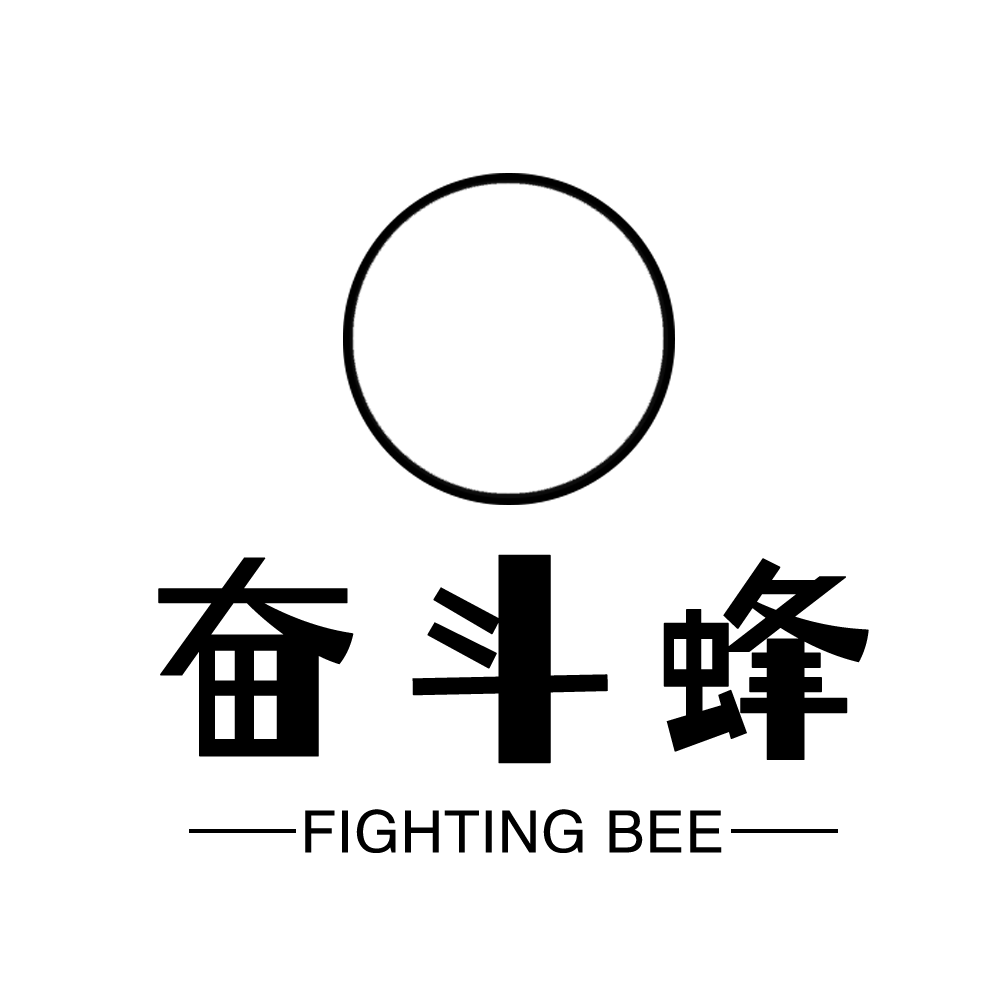
<style>
.page{position:relative;width:1000px;height:1000px;background:#ffffff}
.page>*{position:absolute;margin:0}
.t1{font:221px "TsangerXWZ";letter-spacing:0.12em;color:#000000;font-weight:bold}
.t2{font:58.5px "FZHTJW--GB1-0";letter-spacing:0.02em;color:#000000}
</style>
<div class="page">
<p class="t1" style="left:158px;top:554px;width:711px;height:210px">奋斗蜂</p>
<p class="t2" style="left:305px;top:809px;width:417px;height:44px">FIGHTING BEE</p>
</div>
